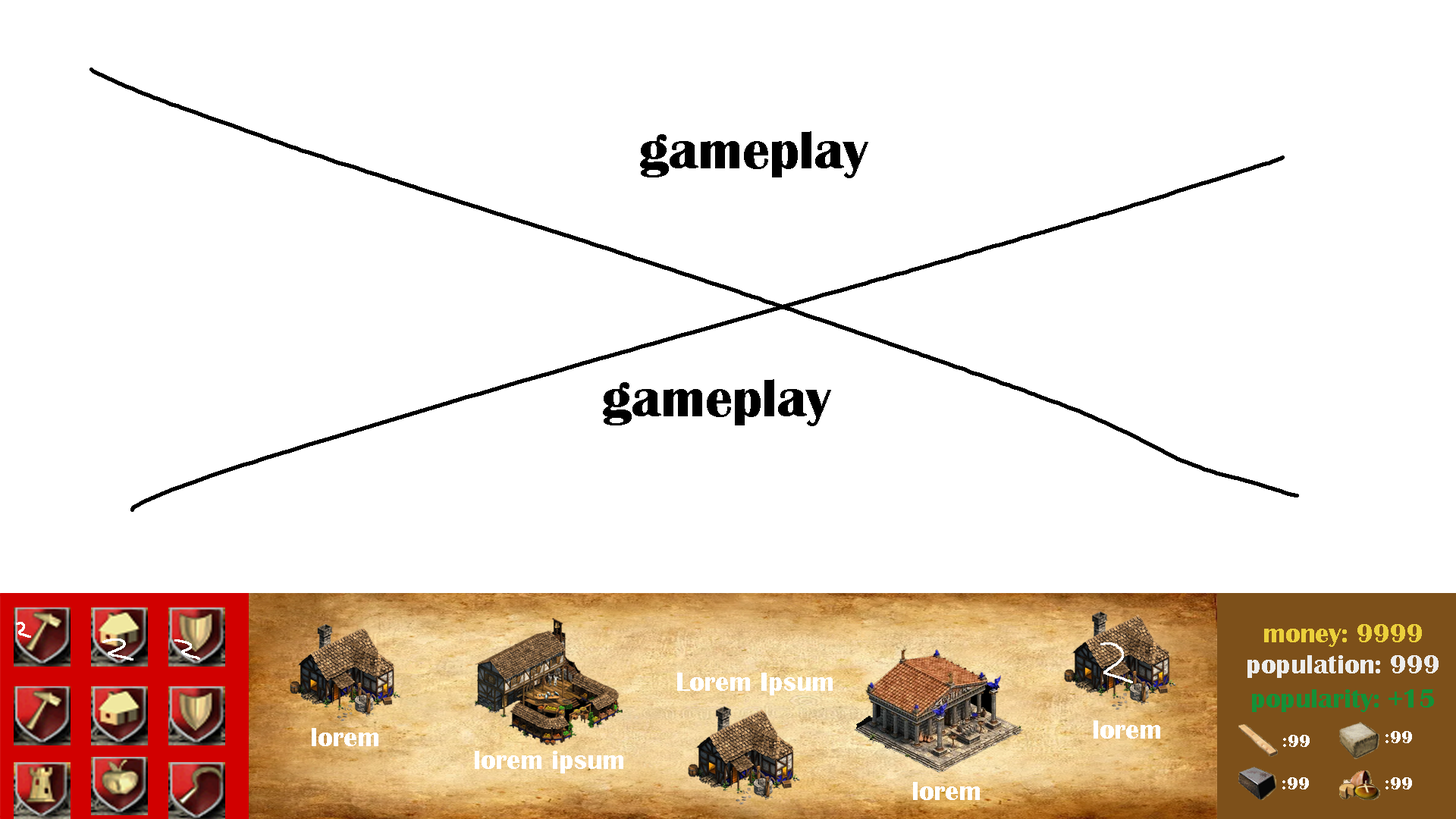
<style>
.page{position:relative;width:1456px;height:819px;background:#ffffff}
.page>*{position:absolute;margin:0}
.t1{font:54.6px "BritannicBold";color:#000000}
.t2{font:27.3px "BritannicBold";color:#ebd03b}
.t3{font:27.3px "BritannicBold";color:#ececec}
.t4{font:27.3px "BritannicBold";color:#ffffff}
.t5{font:27.3px "BritannicBold";color:#149037}
.t6{font:18.2px "BritannicBold";color:#ffffff}
</style>
<div class="page">
<p class="t1" style="left:640px;top:131px;width:228px;height:47px">gameplay</p>
<p class="t1" style="left:603px;top:379px;width:228px;height:47px">gameplay</p>
<p class="t2" style="left:1264px;top:624px;width:158px;height:23px">money: 9999</p>
<p class="t3" style="left:1247px;top:655px;width:192px;height:23px">population: 999</p>
<p class="t4" style="left:677px;top:673px;width:156px;height:22px">Lorem Ipsum</p>
<p class="t5" style="left:1252px;top:689px;width:182px;height:23px">popularity: +15</p>
<p class="t4" style="left:1094px;top:720px;width:66px;height:19px">lorem</p>
<p class="t4" style="left:312px;top:728px;width:66px;height:18px">lorem</p>
<p class="t6" style="left:1283px;top:735px;width:27px;height:12px">:99</p>
<p class="t6" style="left:1385px;top:731px;width:27px;height:12px">:99</p>
<p class="t4" style="left:475px;top:751px;width:148px;height:22px">lorem ipsum</p>
<p class="t4" style="left:913px;top:782px;width:67px;height:18px">lorem</p>
<p class="t6" style="left:1282px;top:777px;width:27px;height:12px">:99</p>
<p class="t6" style="left:1385px;top:777px;width:27px;height:12px">:99</p>
</div>
